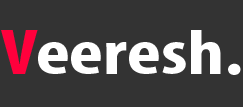
<style>
.page{position:relative;width:243px;height:107px;background:#333333}
.page>*{position:absolute;margin:0}
.t1{font:64.9px "MyriadPro-BoldCond";color:#ffffff;scale:1.25 1}
.t2{font:64.9px "MyriadPro-BoldCond";color:#ff003c;scale:1.25 1}
</style>
<div class="page">
<p class="t1" style="left:1px;top:30px;width:240px;height:45px"><span class="t2">V</span>eeresh.</p>
</div>
